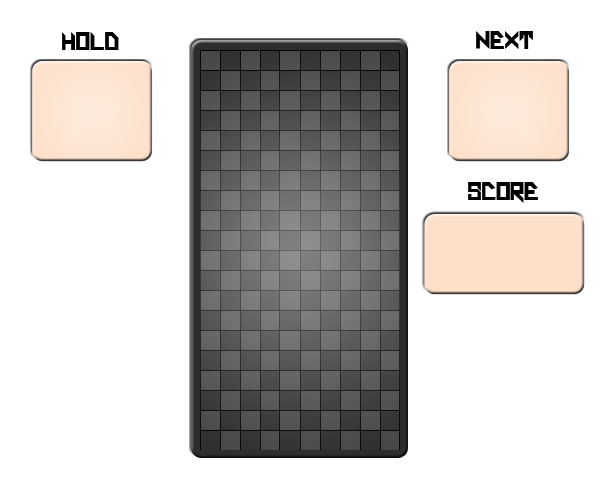
<style>
.page{position:relative;width:600px;height:500px;background:#ffffff}
.page>*{position:absolute;margin:0}
.t1{font:24px "Vador-Black";color:#000000}
</style>
<div class="page">
<p class="t1" style="left:62px;top:32px;width:57px;height:18px">HOLD</p>
<p class="t1" style="left:476px;top:31px;width:57px;height:18px">NEXT</p>
<p class="t1" style="left:468px;top:182px;width:70px;height:21px">SCORE</p>
</div>
